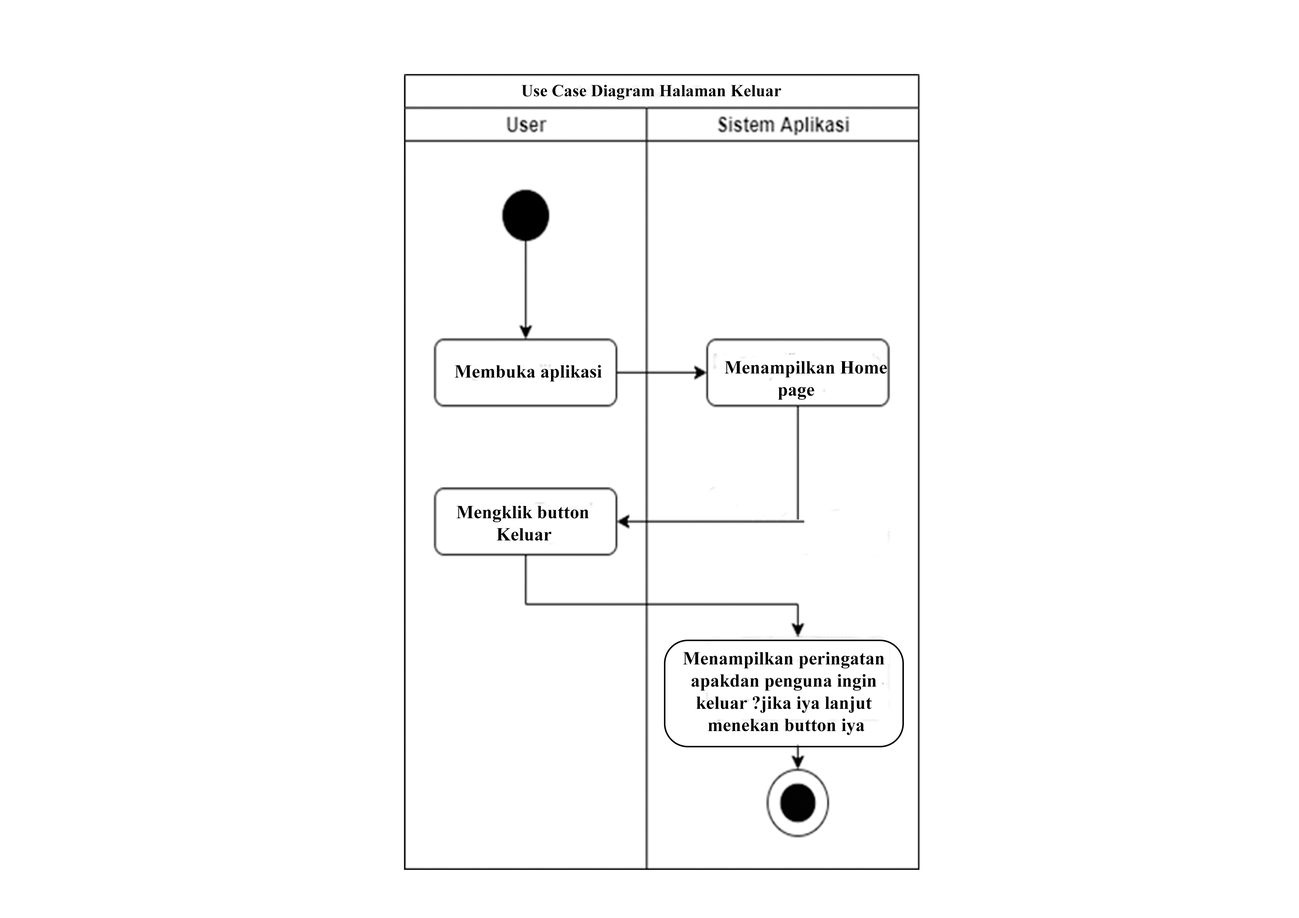
<style>
.page{position:relative;width:1299px;height:918px;background:#ffffff}
.page>*{position:absolute;margin:0}
.t1{font:17px "TimesNewRomanPS-BoldMT";color:#000000}
.t2{font:18.5px "TimesNewRomanPS-BoldMT";color:#000000}
</style>
<div class="page">
<p class="t1" style="left:521px;top:85px;width:260px;height:15px">Use Case Diagram Halaman Keluar</p>
<p class="t2" style="left:454px;top:365px;width:148px;height:17px">Membuka aplikasi</p>
<p class="t2" style="left:724px;top:361px;width:163px;height:39px">Menampilkan Home<br>    page</p>
<p class="t2" style="left:456px;top:506px;width:133px;height:35px">Mengklik button <br>   Keluar</p>
<p class="t2" style="left:683px;top:652px;width:201px;height:83px;text-align:center">Menampilkan peringatan <br>apakdan penguna ingin <br>keluar ?jika iya lanjut <br>menekan button iya</p>
</div>
